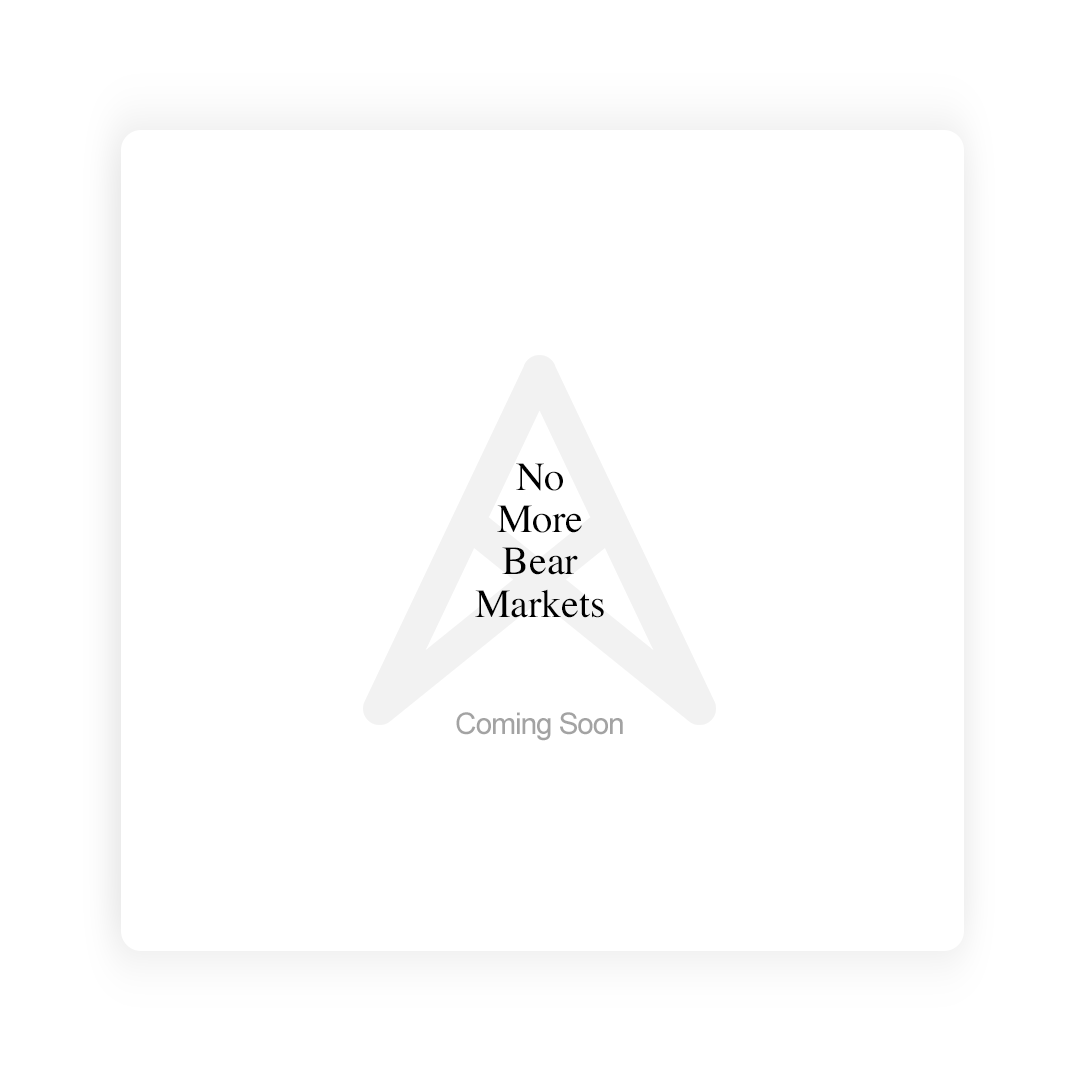
<style>
.page{position:relative;width:1080px;height:1080px;background:#ffffff}
.page>*{position:absolute;margin:0}
.t1{font:40px/42.2px "Times-Roman";color:#000000}
.t2{font:40px/42.2px "Times-Roman";letter-spacing:-0.04em;color:#000000}
.t3{font:30px "ArialMT";letter-spacing:-0.04em;color:#a3a3a3}
</style>
<div class="page">
<p class="t1" style="left:475px;top:463px;width:129px;height:155px;text-align:center"><span class="t2">No<br></span>More<br>Bear<br>Markets</p>
<p class="t3" style="left:456px;top:712px;width:167px;height:29px">Coming Soon</p>
</div>
